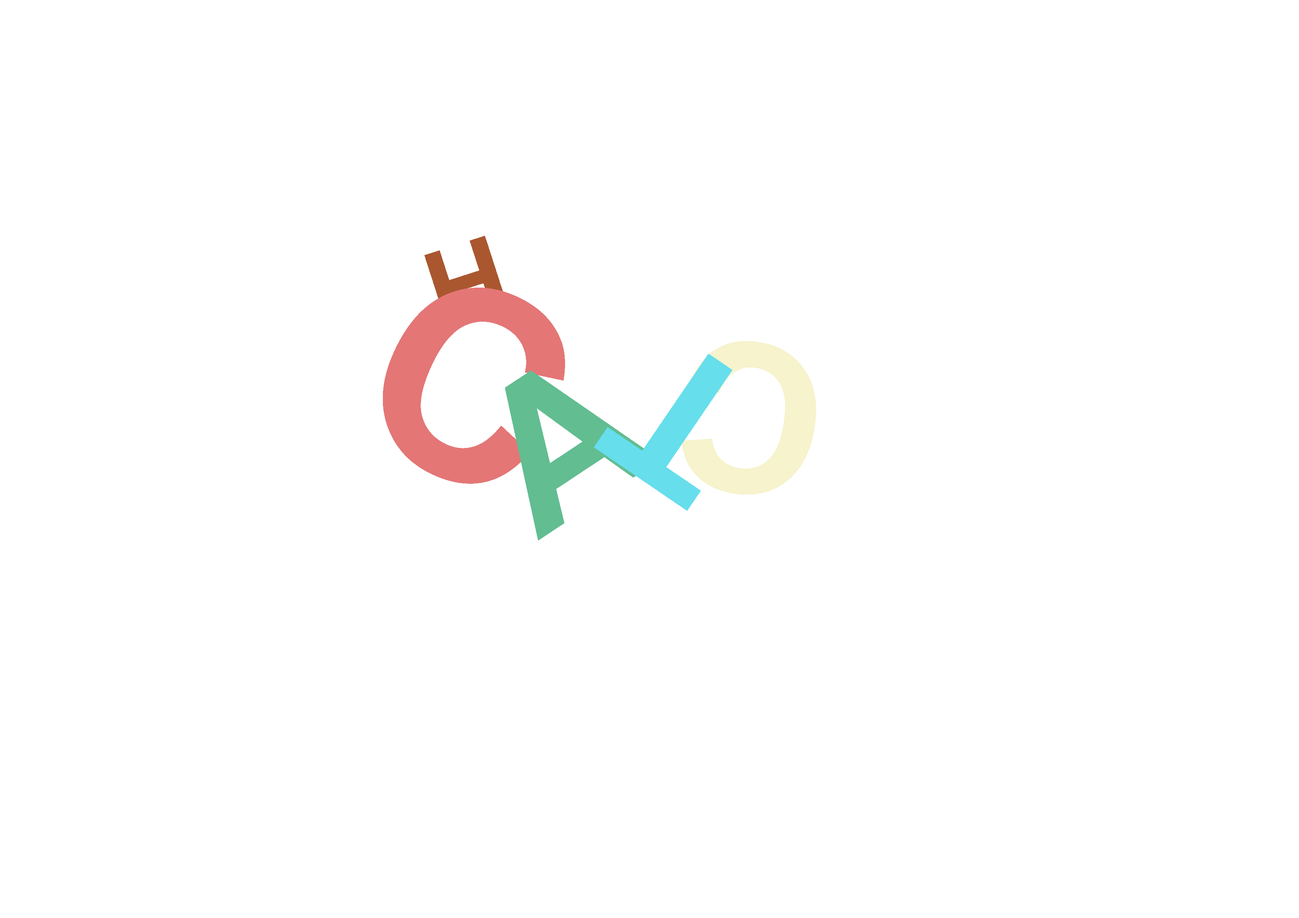
<style>
.page{position:relative;width:1299px;height:918px;background:#ffffff}
.page>*{position:absolute;margin:0}
.t1{font:111.1px "Arial-BoldMT";color:#aa572f}
.t2{font:265.3px "Arial-BoldMT";color:#e47676}
.t3{font:207.1px "Arial-BoldMT";color:#f6f3cd}
.t4{font:197.6px "Arial-BoldMT";color:#66deec}
.t5{font:203px "Arial-BoldMT";color:#62bd91}
</style>
<div class="page">
<p class="t1" style="left:424px;top:236px;width:85px;height:95px;rotate:-18deg">H</p>
<p class="t2" style="left:383px;top:288px;width:182px;height:196px;rotate:25deg">C</p>
<p class="t3" style="left:682px;top:341px;width:134px;height:154px;rotate:-171deg">C</p>
<p class="t4" style="left:594px;top:354px;width:138px;height:157px;rotate:-146deg">T</p>
<p class="t5" style="left:505px;top:371px;width:155px;height:170px;rotate:-34deg">A</p>
</div>
